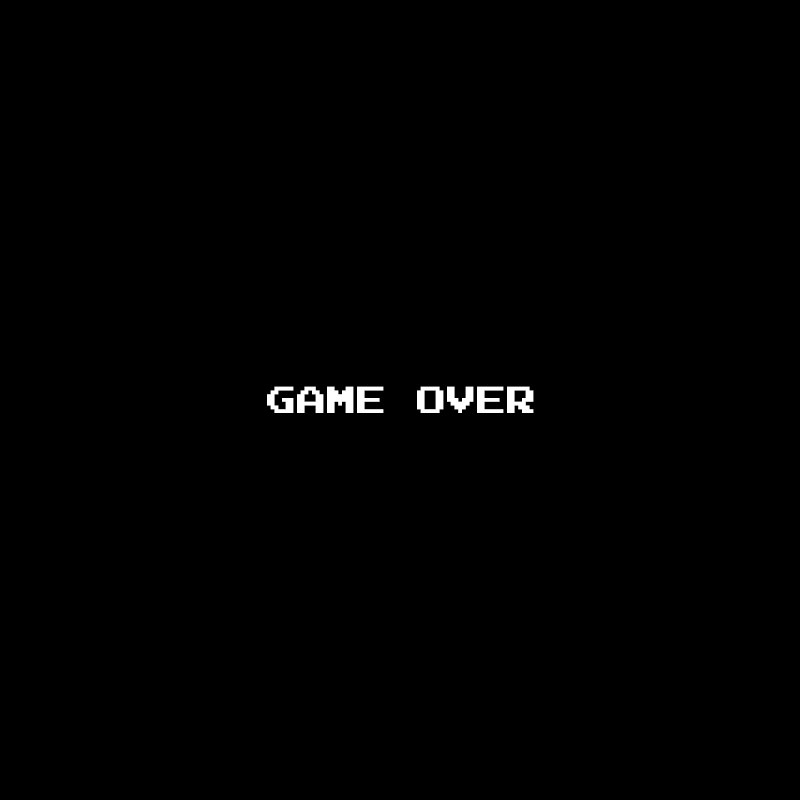
<style>
.page{position:relative;width:800px;height:800px;background:#000000}
.page>*{position:absolute;margin:0}
.t1{font:30px "Nintendo-NES-Font";color:#ffffff}
</style>
<div class="page">
<p class="t1" style="left:267px;top:386px;width:267px;height:27px">GAME OVER</p>
</div>
